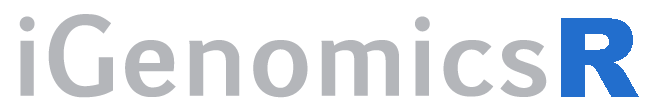
<style>
.page{position:relative;width:648px;height:108px;background:#ffffff}
.page>*{position:absolute;margin:0}
.t1{font:103.9px "EuphemiaUCAS-Bold";color:#b4b6ba}
.t2{font:110px "Arial-Black";color:#226ecd}
</style>
<div class="page">
<p class="t1" style="left:19px;top:14px;width:528px;height:84px">iGenomics</p>
<p class="t2" style="left:561px;top:18px;width:78px;height:79px">R</p>
</div>
